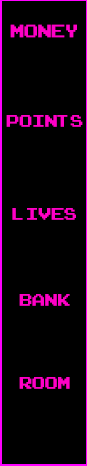
<style>
.page{position:relative;width:87px;height:466px;background:#000000}
.page>*{position:absolute;margin:0}
.t1{font:25px "ArcadeClassic";color:#ff00c6}
.t2{font:23.2px "ArcadeClassic";color:#ff00c6}
</style>
<div class="page">
<p class="t1" style="left:10px;top:24px;width:67px;height:14px">MONEY</p>
<p class="t2" style="left:6px;top:115px;width:77px;height:12px">POINTS</p>
<p class="t2" style="left:12px;top:208px;width:64px;height:12px">LIVES</p>
<p class="t2" style="left:19px;top:294px;width:51px;height:12px">BANK</p>
<p class="t2" style="left:19px;top:377px;width:51px;height:12px">ROOM</p>
</div>
